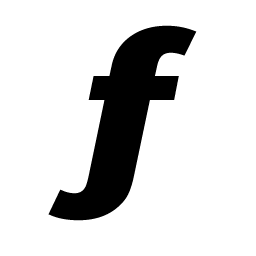
<style>
.page{position:relative;width:256px;height:256px;background:#ffffff}
.page>*{position:absolute;margin:0}
.t1{font:200px "StoneSansITCTTBold";color:#000000;font-weight:bold}
</style>
<div class="page">
<p class="t1" style="left:48px;top:25px;width:149px;height:196px">ƒ</p>
</div>
